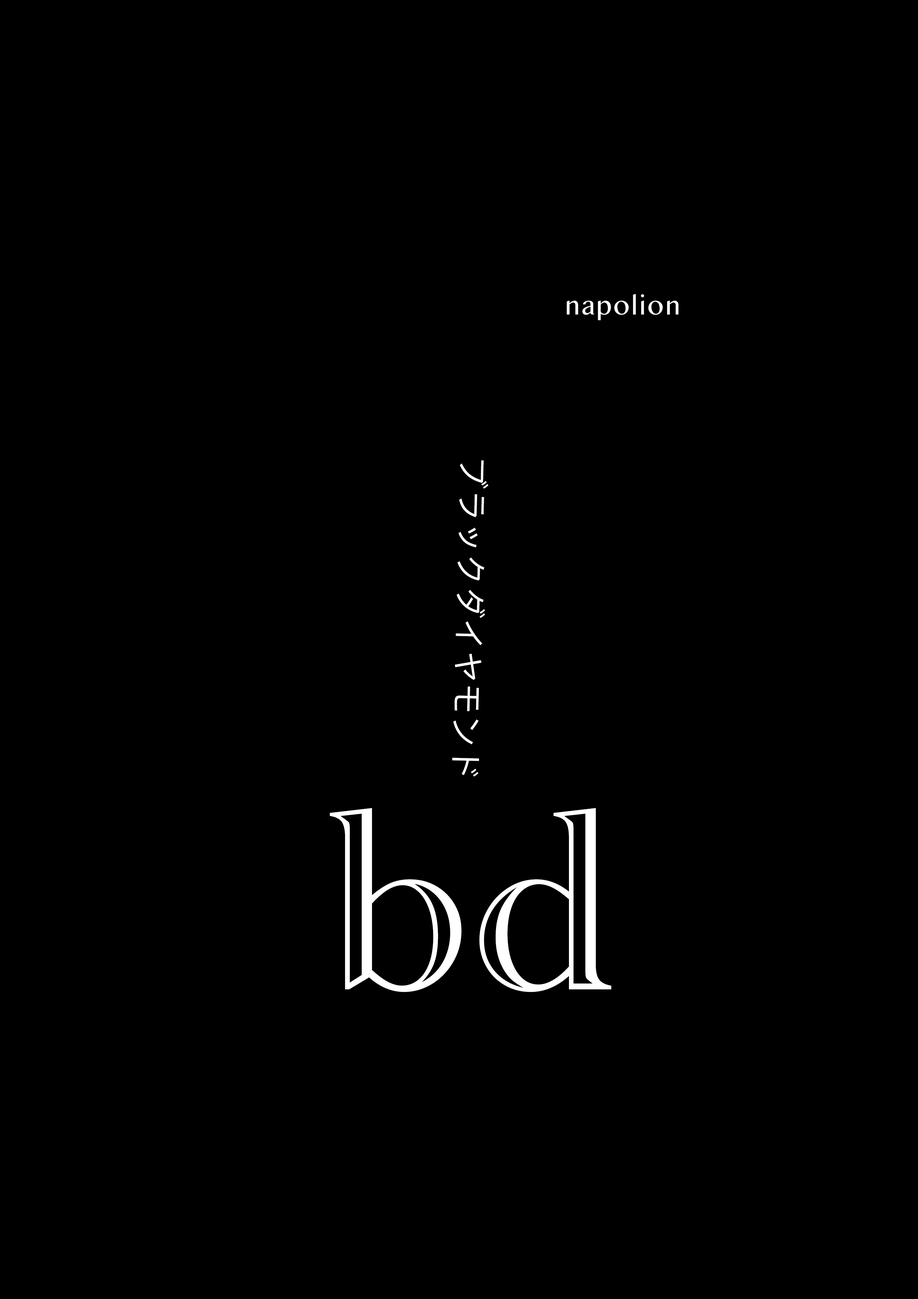
<style>
.page{position:relative;width:918px;height:1299px;background:#000000}
.page>*{position:absolute;margin:0}
.t1{font:27.1px "OriyaMN";letter-spacing:0.02em;color:#ffffff}
.t2{font:31.7px "PingFangHK-Regular";letter-spacing:0.02em;color:#ffffff}
.t3{font:31.7px "Copperplate";letter-spacing:0.02em;color:#ffffff}
.t4{font:268.5px "AcademyEngravedLetPlain";letter-spacing:0.02em;color:#ffffff}
</style>
<div class="page">
<p class="t1" style="left:567px;top:294px;width:112px;height:26px">napolion</p>
<p class="t2" style="left:452px;top:460px;width:37px;height:316px;rotate:91deg"><span class="t3"><br></span>ブラックダイヤモンド</p>
<p class="t4" style="left:330px;top:808px;width:282px;height:184px">bd</p>
</div>
